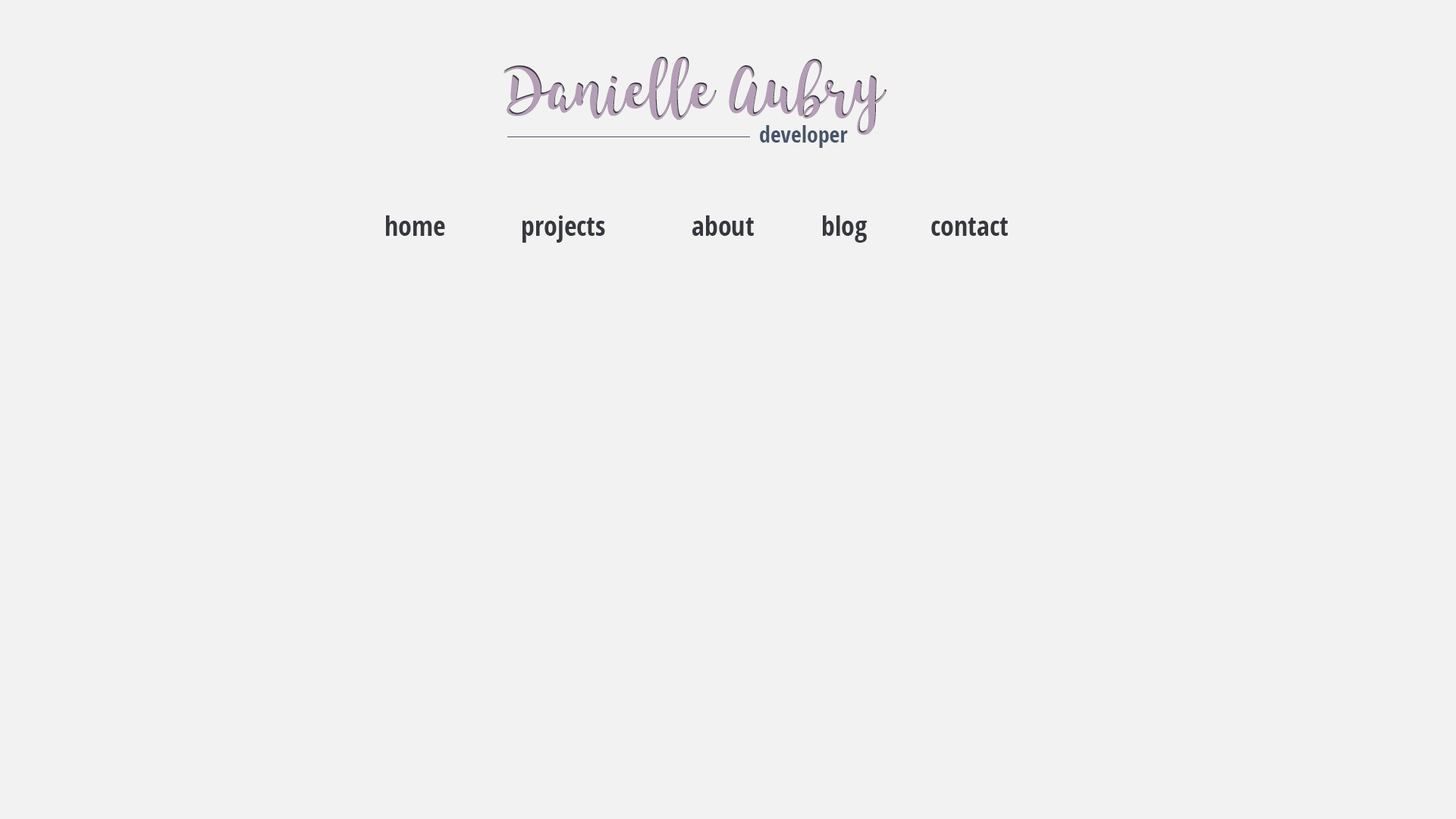
<style>
.page{position:relative;width:1456px;height:819px;background:#f2f2f2}
.page>*{position:absolute;margin:0}
.t1{font:54.6px "KingBasilLite-Regular";color:#b39eb5}
.t2{font:22.7px "OpenSans-CondensedBold";color:#465569}
.t3{font:27.3px "OpenSans-CondensedBold";color:#37383d}
</style>
<div class="page">
<p class="t1" style="left:504px;top:58px;width:382px;height:77px">Danielle Aubry</p>
<p class="t1" style="left:504px;top:56px;width:382px;height:77px">Danielle Aubry</p>
<p class="t2" style="left:760px;top:125px;width:88px;height:23px">developer</p>
<p class="t3" style="left:386px;top:215px;width:622px;height:28px">home   projects    about   blog   contact</p>
</div>
